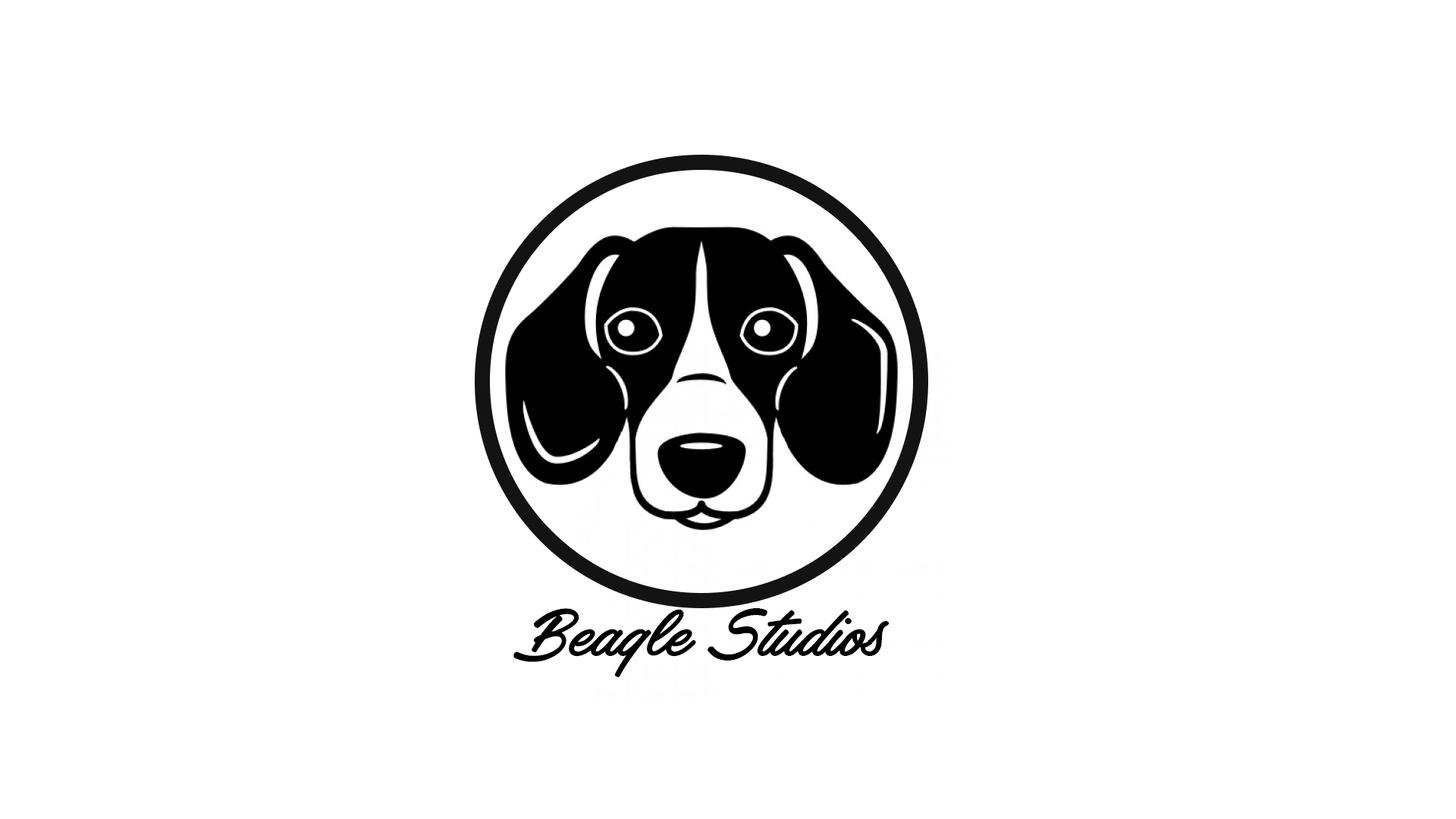
<style>
.page{position:relative;width:1456px;height:819px;background:#ffffff}
.page>*{position:absolute;margin:0}
.t1{font:75.8px "HaydonBrushPERSONALUSE";color:#000000}
</style>
<div class="page">
<p class="t1" style="left:513px;top:608px;width:377px;height:69px">Beagle Studios</p>
</div>
